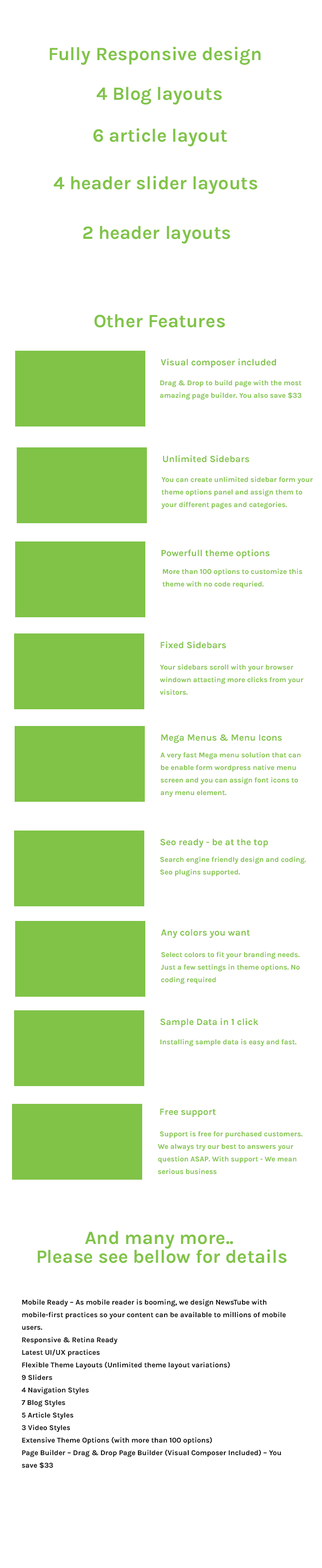
<style>
.page{position:relative;width:322px;height:1568px;background:#ffffff}
.page>*{position:absolute;margin:0}
.t1{font:18.8px "Karla-Bold";color:#80c347}
.t2{font:9.4px "Karla-Bold";color:#80c347}
.t3{font:7.3px/12.5px "Karla-Bold";color:#80c347}
.t4{font:7.3px "Karla-Bold";color:#80c347}
.t5{font:18.8px/18.8px "Karla-Bold";color:#80c347}
.t6{font:7.3px/12.5px "Karla-Bold";color:#000000}
</style>
<div class="page">
<p class="t1" style="left:50px;top:47px;width:211px;height:18px">Fully Responsive design</p>
<p class="t1" style="left:96px;top:87px;width:126px;height:18px">4 Blog layouts</p>
<p class="t1" style="left:93px;top:128px;width:134px;height:18px">6 article layout</p>
<p class="t1" style="left:53px;top:176px;width:205px;height:18px">4 header slider layouts</p>
<p class="t1" style="left:83px;top:226px;width:147px;height:18px">2 header layouts</p>
<p class="t1" style="left:94px;top:314px;width:131px;height:14px">Other Features</p>
<p class="t2" style="left:160px;top:359px;width:116px;height:9px">Visual composer included</p>
<p class="t3" style="left:160px;top:380px;width:142px;height:20px">Drag &amp; Drop to build page with the most <br>amazing page builder. You also save $33</p>
<p class="t2" style="left:163px;top:455px;width:86px;height:8px">Unlimited Sidebars</p>
<p class="t3" style="left:161px;top:476px;width:152px;height:33px">You can create unlimited sidebar form your <br>theme options panel and assign them to <br>your different pages and categories.</p>
<p class="t2" style="left:162px;top:549px;width:108px;height:10px">Powerfull theme options</p>
<p class="t3" style="left:163px;top:569px;width:139px;height:20px">More than 100 options to customize this theme with no code requried.</p>
<p class="t2" style="left:160px;top:641px;width:66px;height:8px">Fixed Sidebars</p>
<p class="t3" style="left:160px;top:664px;width:144px;height:31px">Your sidebars scroll with your browser windown attacting more clicks from your visitors.</p>
<p class="t2" style="left:161px;top:734px;width:121px;height:9px">Mega Menus &amp; Menu Icons</p>
<p class="t3" style="left:160px;top:752px;width:141px;height:45px">A very fast Mega menu solution that can be enable form wordpress native menu screen and you can assign font icons to any menu element.</p>
<p class="t2" style="left:160px;top:838px;width:108px;height:10px">Seo ready - be at the top</p>
<p class="t3" style="left:160px;top:856px;width:146px;height:21px">Search engine friendly design and coding. Seo plugins supported.</p>
<p class="t2" style="left:161px;top:929px;width:89px;height:9px">Any colors you want</p>
<p class="t3" style="left:160px;top:952px;width:140px;height:32px">Select colors to fit your branding needs. Just a few settings in theme options. No coding required</p>
<p class="t2" style="left:160px;top:1018px;width:98px;height:10px">Sample Data in 1 click</p>
<p class="t4" style="left:160px;top:1039px;width:136px;height:7px">Installing sample data is easy and fast.</p>
<p class="t2" style="left:160px;top:1109px;width:56px;height:8px">Free support</p>
<p class="t3" style="left:158px;top:1131px;width:145px;height:43px">Support is free for purchased customers. We always try our best to answers your question ASAP. With support - We mean serious business</p>
<p class="t5" style="left:38px;top:1231px;width:249px;height:32px;text-align:center">And many more.. <br>Please see bellow for details</p>
<p class="t6" style="left:21px;top:1299px;width:265px;height:170px">Mobile Ready – As mobile reader is booming, we design NewsTube with mobile-first practices so your content can be available to millions of mobile users.<br>Responsive &amp; Retina Ready<br>Latest UI/UX practices<br>Flexible Theme Layouts (Unlimited theme layout variations)<br>9 Sliders<br>4 Navigation Styles<br>7 Blog Styles<br>5 Article Styles<br>3 Video Styles<br>Extensive Theme Options (with more than 100 options)<br>Page Builder – Drag &amp; Drop Page Builder (Visual Composer Included) – You save $33</p>
</div>
